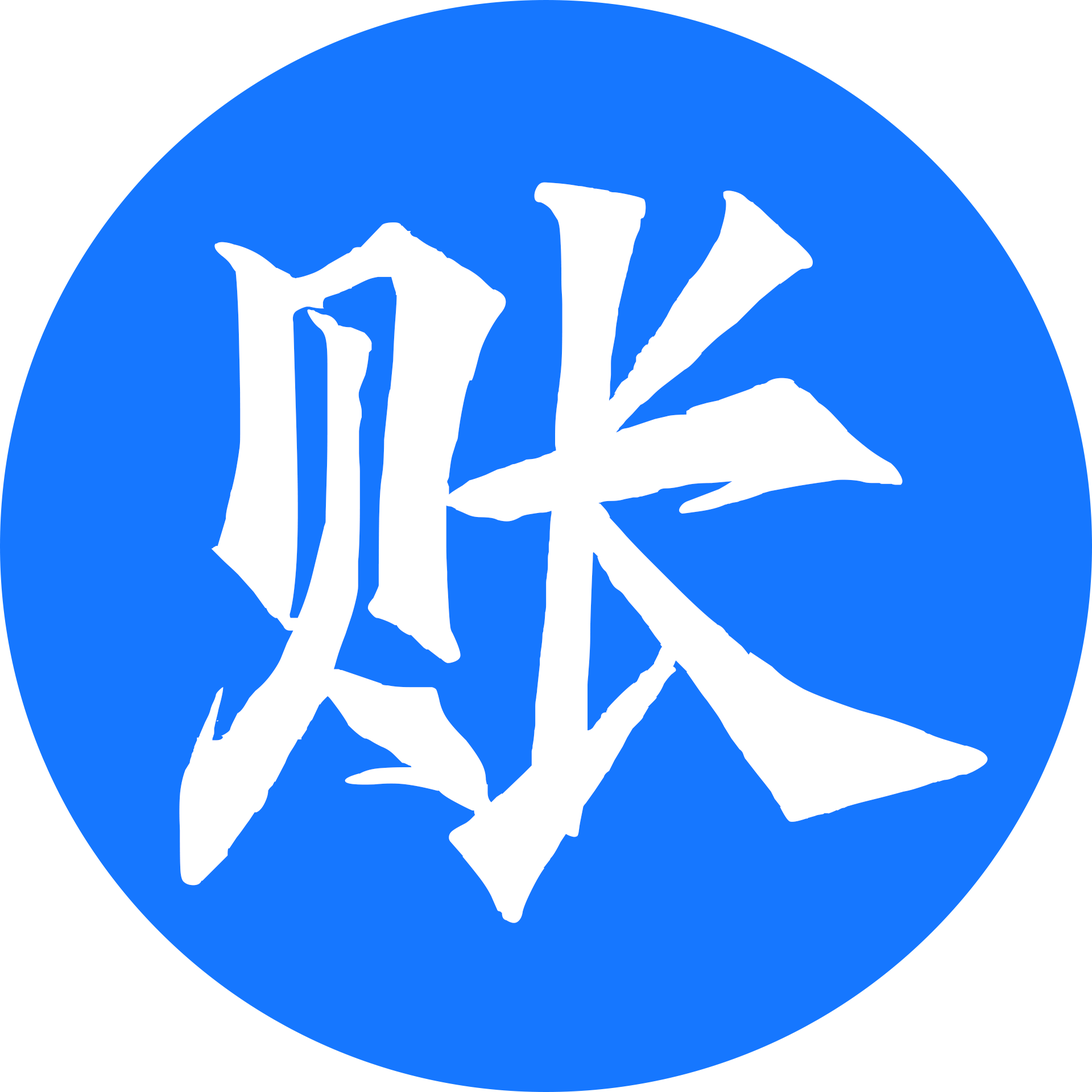
<style>
.page{position:relative;width:1092px;height:1092px;background:#1677ff}
.page>*{position:absolute;margin:0}
.t1{font:899.6px "AaXHSJTNon-CommercialUse";color:#ffffff}
</style>
<div class="page">
<p class="t1" style="left:179px;top:182px;width:809px;height:741px">账</p>
</div>
